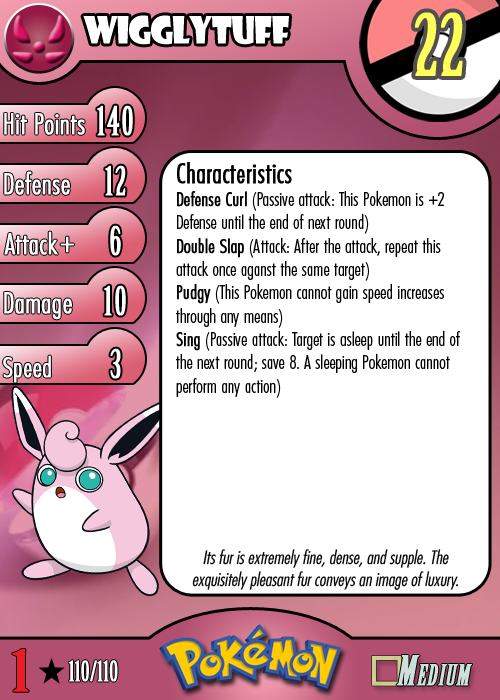
<style>
.page{position:relative;width:500px;height:700px;background:#ffffff}
.page>*{position:absolute;margin:0}
.t1{font:36.7px "ShowcardGothic-Reg";letter-spacing:-0.025em;color:#ffffff;scale:0.91 1}
.t2{font:83.3px "BirchStd";letter-spacing:0.025em;color:#fffd59;font-weight:bold}
.t3{font:27.8px "Futura-CondensedLight";color:#ffffff;font-weight:bold}
.t4{font:38.9px "BirchStd";letter-spacing:0.035em;color:#ffffff;font-weight:bold}
.t5{font:19.4px "FuturaCondensedBQ-Light";color:#010101}
.t6{font:27.8px "FuturaCondensedBQ-Light";color:#010101;font-weight:bold}
.t7{font:19.4px "FuturaCondensedBQ-Light";color:#010101;font-weight:bold}
.t8{font:30.6px "Futura-CondensedLight";color:#ffffff;font-weight:bold}
.t9{font:27.8px "FuturaCondensedBQ-Light";color:#ffffff;font-weight:bold}
.t10{font:18.1px "Futura-CondensedLight";color:#010101;font-style:italic}
.t11{font:55.6px "BirchStd";color:#ed1c24;font-weight:bold;scale:1.5 1}
.t12{font:27.8px "BirchStd";color:#ffffff;font-weight:bold}
</style>
<div class="page">
<p class="t1" style="left:83px;top:15px;width:206px;height:30px">wigglytuff</p>
<p class="t2" style="left:415px;top:12px;width:48px;height:64px">22</p>
<p class="t3" style="left:4px;top:113px;width:81px;height:22px">Hit Points</p>
<p class="t4" style="left:97px;top:105px;width:36px;height:31px">140</p>
<p class="t3" style="left:4px;top:171px;width:66px;height:24px">Defense</p>
<p class="t4" style="left:105px;top:165px;width:21px;height:31px">12</p>
<p class="t5" style="left:176px;top:162px;width:284px;height:236px"><span class="t6">Characteristics<br></span><span class="t7">Defense Curl</span> (Passive attack: This Pokemon is +2 Defense until the end of next round)<br><span class="t7">Double Slap</span> (Attack: After the attack, repeat this attack once aganst the same target)<br><span class="t7">Pudgy</span> (This Pokemon cannot gain speed increases through any means)<br><span class="t7">Sing</span> (Passive attack: Target is asleep until the end of the next round; save 8. A sleeping Pokemon cannot perform any action)</p>
<p class="t3" style="left:4px;top:231px;width:54px;height:24px">Attack</p>
<p class="t4" style="left:110px;top:225px;width:11px;height:31px">6</p>
<p class="t8" style="left:60px;top:236px;width:14px;height:17px">+</p>
<p class="t3" style="left:4px;top:292px;width:68px;height:28px">Damage</p>
<p class="t4" style="left:104px;top:285px;width:22px;height:31px">10</p>
<p class="t4" style="left:110px;top:348px;width:11px;height:31px">3</p>
<p class="t9" style="left:3px;top:355px;width:48px;height:28px">Speed</p>
<p class="t10" style="left:192px;top:549px;width:267px;height:41px;text-align:center">Its fur is extremely fine, dense, and supple. The exquisitely pleasant fur conveys an image of luxury.</p>
<p class="t11" style="left:12px;top:649px;width:17px;height:43px">1</p>
<p class="t12" style="left:68px;top:660px;width:50px;height:22px">110/110</p>
</div>
